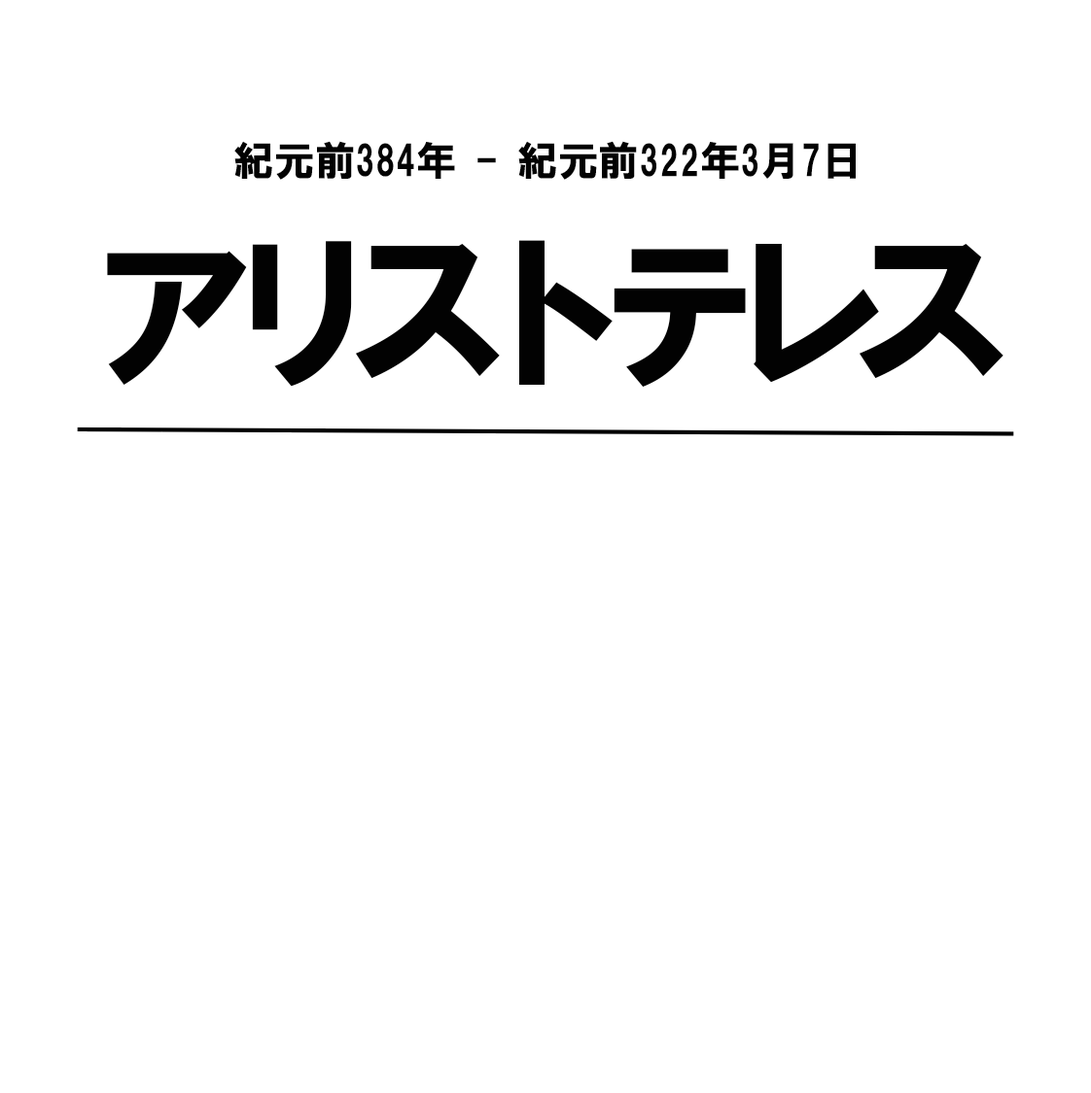
<style>
.page{position:relative;width:1091px;height:1093px;background:#ffffff}
.page>*{position:absolute;margin:0}
.t1{font:40.5px "HGSoeiKakugothicUB";color:#020202}
.t2{font:170.1px "HGSoeiKakugothicUB";letter-spacing:-0.26em;color:#020202}
</style>
<div class="page">
<p class="t1" style="left:234px;top:141px;width:621px;height:39px">紀元前384年 - 紀元前322年3月7日</p>
<p class="t2" style="left:107px;top:240px;width:896px;height:147px">アリストテレス</p>
</div>
